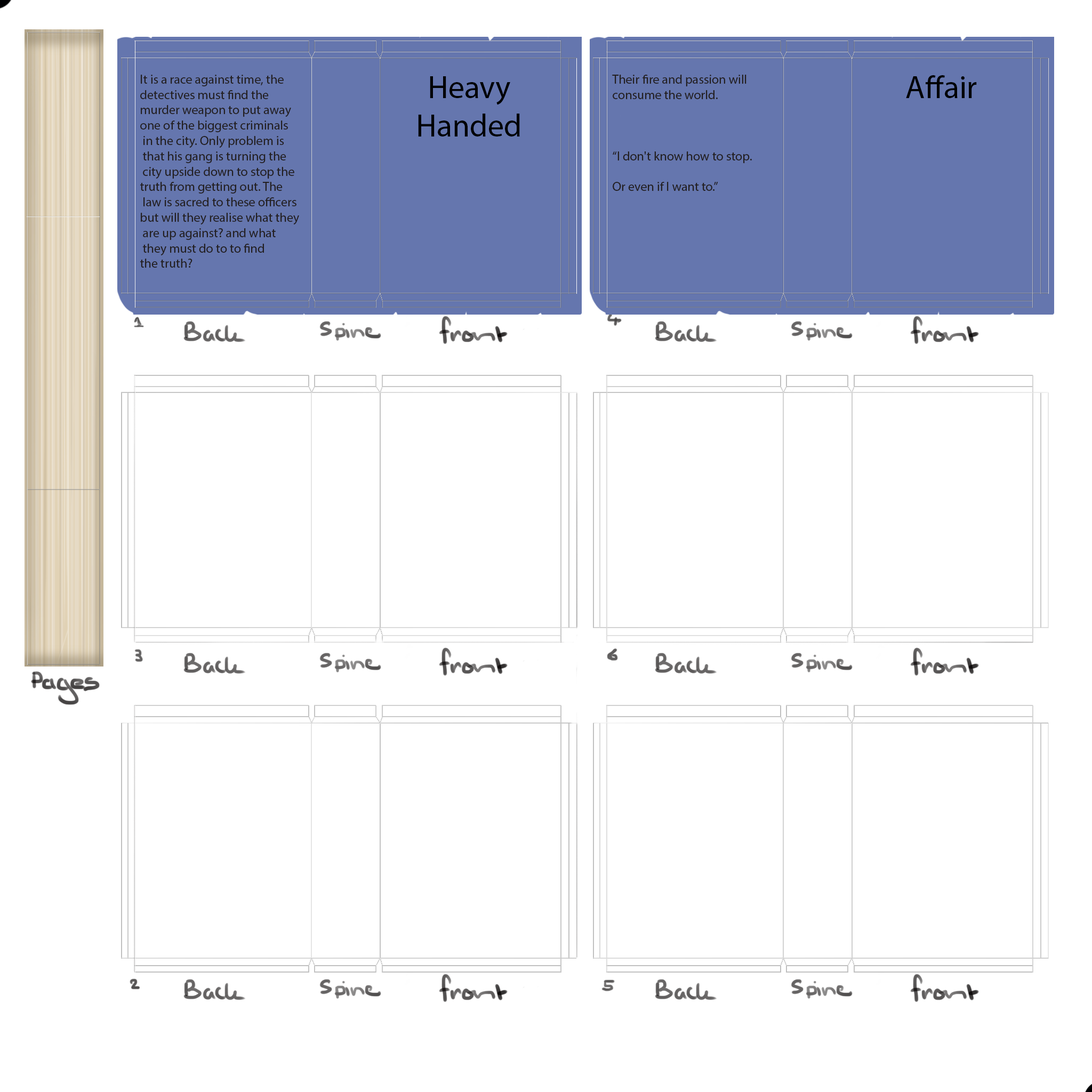
<style>
.page{position:relative;width:1092px;height:1092px;background:#ffffff}
.page>*{position:absolute;margin:0}
.t1{font:12.8px "MyriadPro-Regular";color:#231f20}
.t2{font:32px "MyriadPro-Regular";color:#000103}
</style>
<div class="page">
<p class="t1" style="left:140px;top:75px;width:159px;height:193px">It is a race against time, the <br>detectives must find the <br>murder weapon to put away <br>one of the biggest criminals<br> in the city. Only problem is<br> that his gang is turning the<br> city upside down to stop the <br>truth from getting out. The<br> law is sacred to these officers <br>but will they realise what they<br> are up against? and what<br> they must do to to find <br>the truth?</p>
<p class="t2" style="left:418px;top:76px;width:102px;height:60px;text-align:center">Heavy Handed</p>
<p class="t1" style="left:612px;top:75px;width:140px;height:116px">Their fire and passion will <br>consume the world.<br><br><br><br>“I don't know how to stop.<br><br>Or even if I want to.”</p>
<p class="t2" style="left:906px;top:75px;width:71px;height:23px">Affair</p>
</div>
